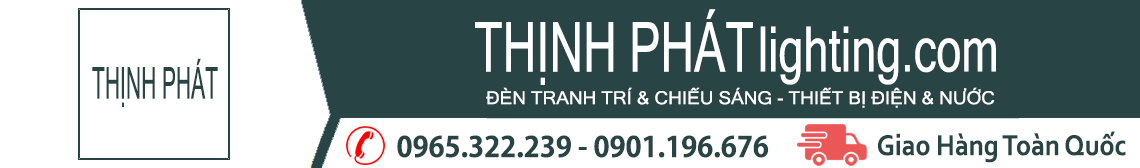
<style>
.page{position:relative;width:1140px;height:168px;background:#ffffff}
.page>*{position:absolute;margin:0}
.t1{font:69.3px "MicrosoftSansSerif";color:#ffffff;scale:0.67 1}
.t2{font:62.4px "MicrosoftSansSerif";color:#ffffff;scale:0.72 1}
.t3{font:44px "MicrosoftSansSerif";color:#284445;scale:0.48 1}
.t4{font:18px "MicrosoftSansSerif";color:#ffffff;scale:1.06 1}
.t5{font:28px "AdobeGothicStd-Bold";color:#284445}
.t6{font:30px "Corbel-Bold";color:#284445;scale:0.9 1}
</style>
<div class="page">
<p class="t1" style="left:475px;top:9px;width:278px;height:76px">THỊNH PHÁT</p>
<p class="t2" style="left:760px;top:26px;width:236px;height:59px">lighting.com</p>
<p class="t3" style="left:92px;top:58px;width:126px;height:49px">THỊNH PHÁT</p>
<p class="t4" style="left:486px;top:87px;width:509px;height:21px">ĐÈN TRANH TRÍ &amp; CHIẾU SÁNG - THIẾT BỊ ĐIỆN &amp; NƯỚC</p>
<p class="t5" style="left:397px;top:135px;width:372px;height:23px">0965.322.239 - 0901.196.676</p>
<p class="t6" style="left:878px;top:131px;width:248px;height:32px">Giao Hàng Toàn Quốc</p>
</div>
